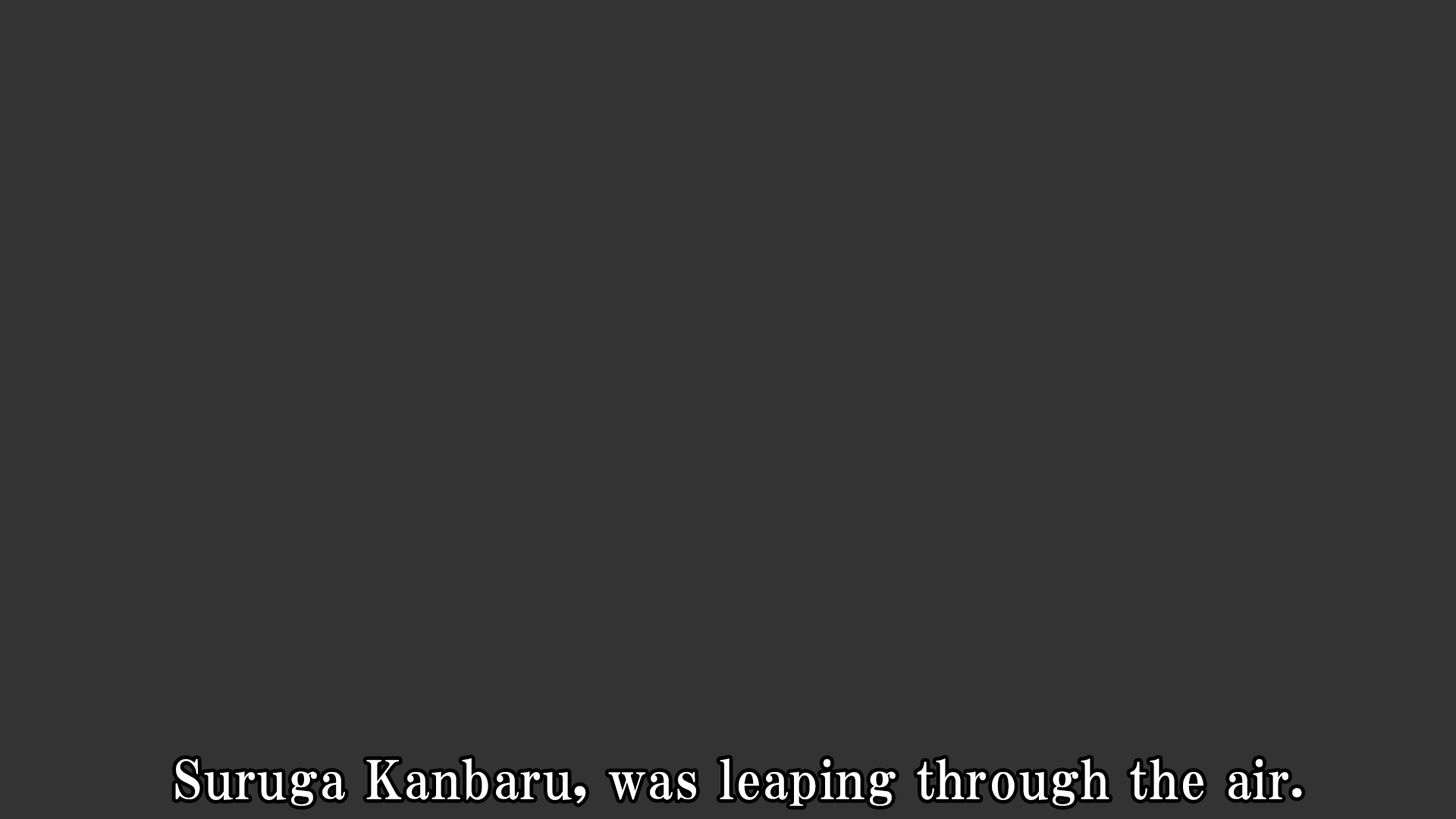
<style>
.page{position:relative;width:1456px;height:819px;background:#333333}
.page>*{position:absolute;margin:0}
.t1{font:53.1px "HGPMinchoE";letter-spacing:0.025em;color:#ffffff}
</style>
<div class="page">
<p class="t1" style="left:175px;top:758px;width:1127px;height:48px">Suruga Kanbaru, was leaping through the air.</p>
</div>
